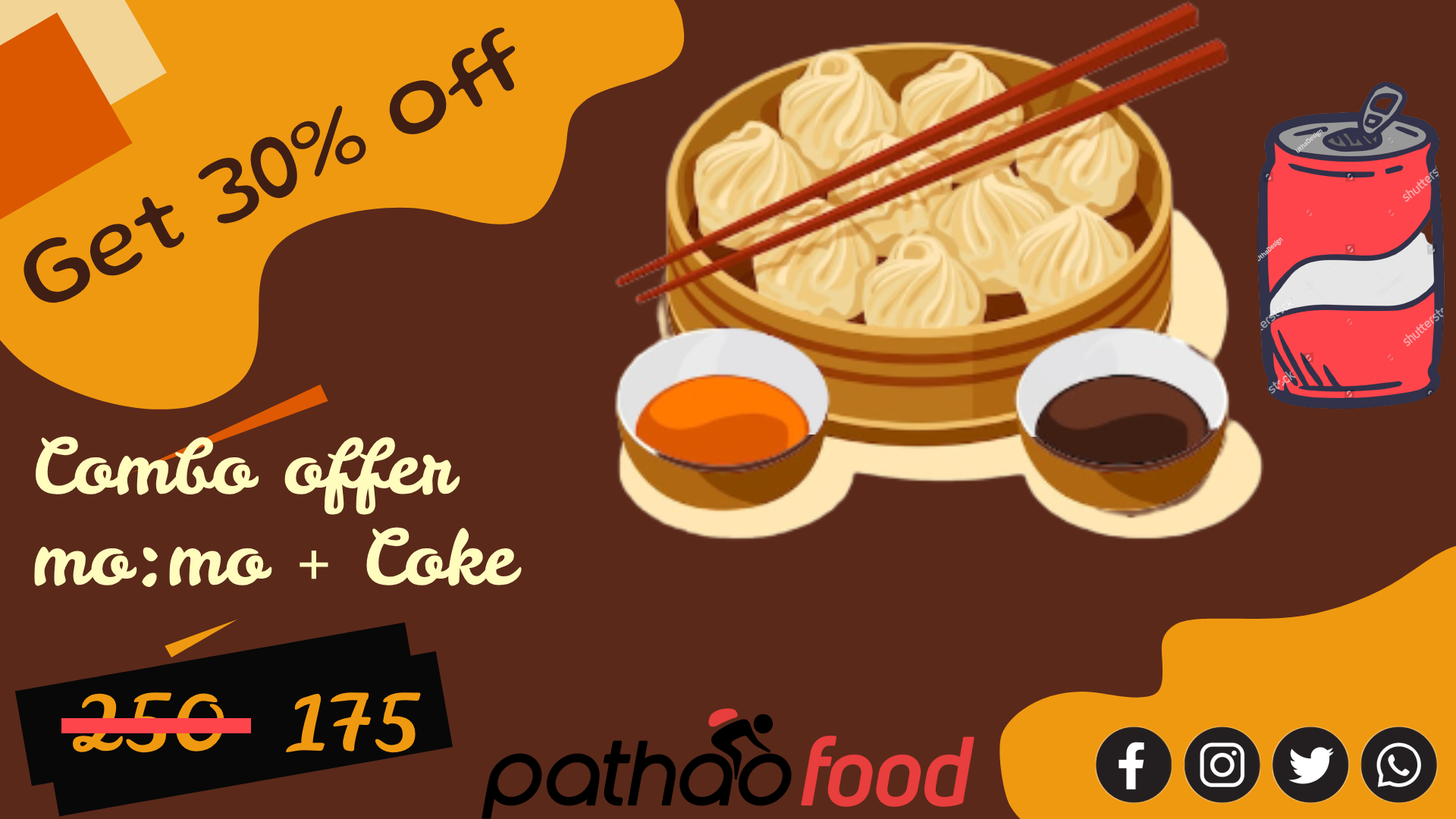
<style>
.page{position:relative;width:1456px;height:819px;background:#5a291a}
.page>*{position:absolute;margin:0}
.t1{font:95.4px "Gluten-Regular";color:#3f1f14}
.t2{font:75.8px "LeckerliOne-Regular";color:#fffcbe}
.t3{font:75.8px "LeckerliOne-Regular";color:#ef9911}
</style>
<div class="page">
<p class="t1" style="left:23px;top:27px;width:493px;height:276px;rotate:-25deg">Get 30% off</p>
<p class="t2" style="left:34px;top:436px;width:488px;height:151px">Combo offer<br>mo:mo + Coke</p>
<p class="t3" style="left:73px;top:692px;width:348px;height:61px">250  175</p>
</div>
